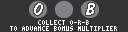
<style>
.page{position:relative;width:128px;height:32px;background:#333333}
.page>*{position:absolute;margin:0}
.t1{font:18px "DomDiagonalBT-Regular";letter-spacing:0.075em;color:#ffffff}
.t2{font:6px "Terminal";color:#ffffff}
</style>
<div class="page">
<p class="t1" style="left:34px;top:3px;width:9px;height:12px">O</p>
<p class="t1" style="left:86px;top:3px;width:9px;height:12px">B</p>
<p class="t2" style="left:10px;top:26px;width:107px;height:5px">TO ADVANCE BONUS MULTIPLIER</p>
<p class="t2" style="left:38px;top:20px;width:51px;height:5px">COLLECT O-R-B</p>
</div>
